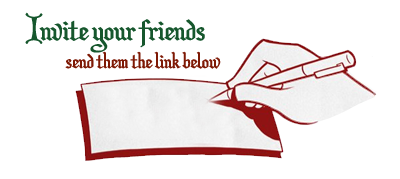
<style>
.page{position:relative;width:400px;height:179px;background:#ffffff}
.page>*{position:absolute;margin:0}
.t1{font:32px "ChristmasCardII";color:#16572d}
.t2{font:22px "ChristmasCardII";color:#7e1905}
</style>
<div class="page">
<p class="t1" style="left:25px;top:12px;width:180px;height:41px">Invite your friends</p>
<p class="t2" style="left:65px;top:51px;width:156px;height:18px">send them the link below</p>
</div>
